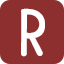
<style>
.page{position:relative;width:64px;height:64px;background:#8e2f2f}
.page>*{position:absolute;margin:0}
.t1{font:68px "Minou-Regular";color:#ffffff}
</style>
<div class="page">
<p class="t1" style="left:21px;top:8px;width:24px;height:49px">R</p>
</div>
